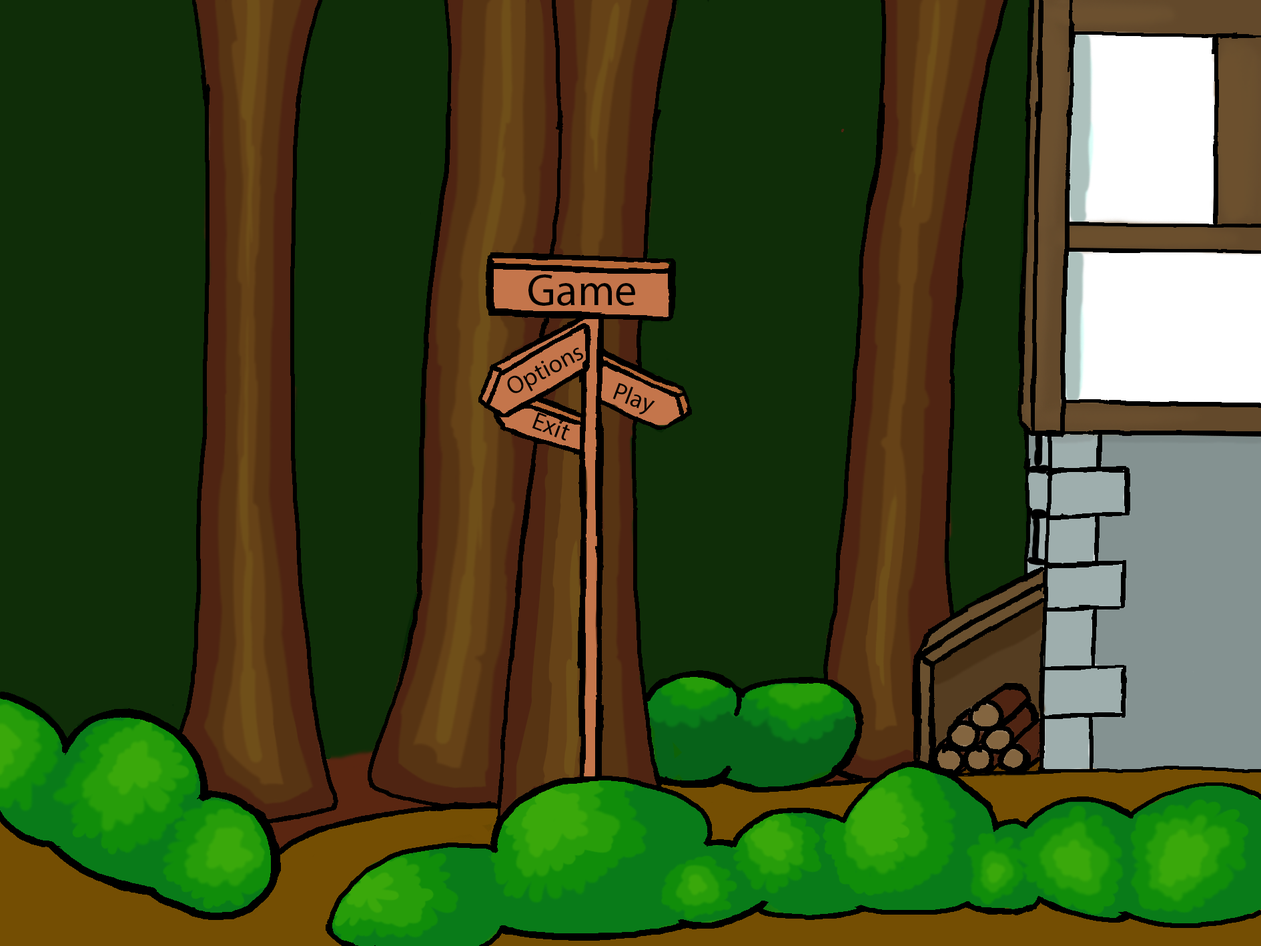
<style>
.page{position:relative;width:1261px;height:946px;background:#0f2d08}
.page>*{position:absolute;margin:0}
.t1{font:44.5px "MyriadPro-Regular";color:#000000}
.t2{font:25px "MyriadPro-Regular";color:#000000}
</style>
<div class="page">
<p class="t1" style="left:528px;top:274px;width:107px;height:32px">Game</p>
<p class="t2" style="left:507px;top:347px;width:76px;height:46px;rotate:-28deg">Options</p>
<p class="t2" style="left:613px;top:382px;width:42px;height:32px;rotate:21deg">Play</p>
<p class="t2" style="left:532px;top:412px;width:38px;height:28px;rotate:21deg">Exit</p>
</div>
